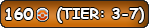
<style>
.page{position:relative;width:149px;height:28px}
.page>*{position:absolute;margin:0}
.t1{font:12px "ComicSansMS-Bold";color:#ffffff}
.t2{font:14.7px "ComicSansMS-Bold";color:#ffffff}
</style>
<div class="page">
<p class="t1" style="left:5px;top:8px;width:29px;height:12px">160</p>
<p class="t2" style="left:57px;top:7px;width:87px;height:16px">(TIER: 3-7)</p>
</div>
